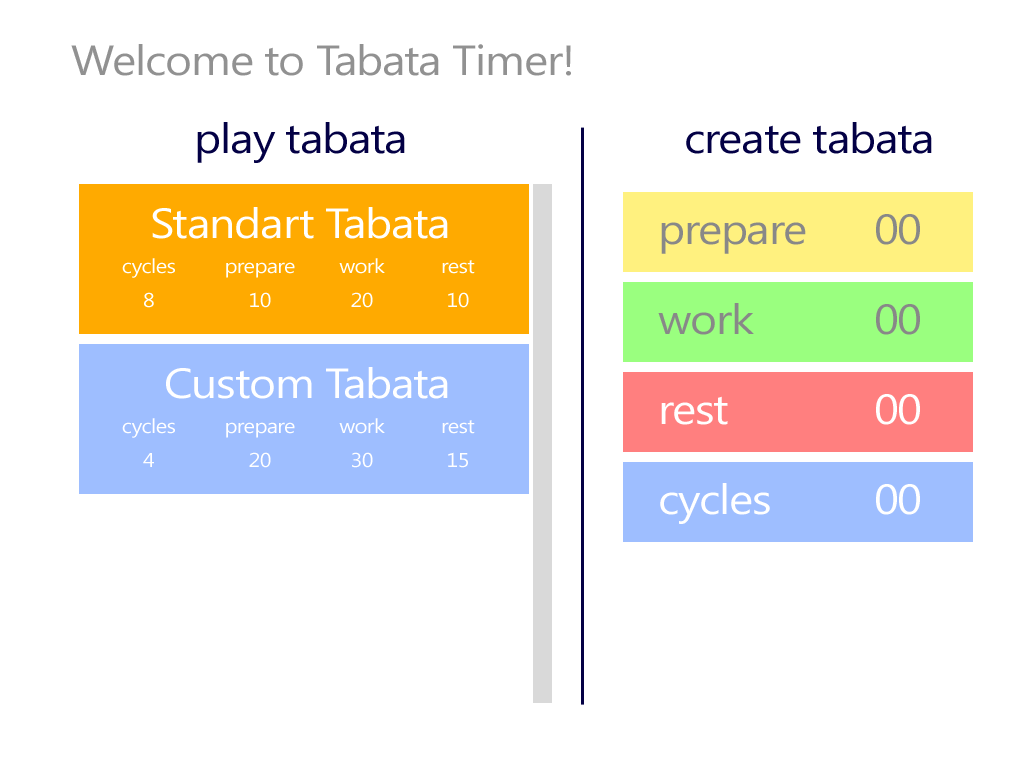
<style>
.page{position:relative;width:1024px;height:768px;background:#ffffff}
.page>*{position:absolute;margin:0}
.t1{font:42px "SegoeUI";letter-spacing:-0.025em;color:#919191;scale:1.1 1}
.t2{font:42px "SegoeUI";letter-spacing:-0.025em;color:#030045;scale:1.1 1}
.t3{font:42px "SegoeUI";letter-spacing:-0.025em;color:#ffffff;scale:1.1 1}
.t4{font:42px "SegoeUI";letter-spacing:-0.025em;color:#888888;scale:1.1 1}
.t5{font:20px "SegoeUI";letter-spacing:-0.025em;color:#ffffff;scale:1.1 1}
</style>
<div class="page">
<p class="t1" style="left:71px;top:44px;width:500px;height:32px">Welcome to Tabata Timer!</p>
<p class="t2" style="left:197px;top:122px;width:208px;height:41px">play tabata</p>
<p class="t2" style="left:686px;top:122px;width:246px;height:32px">create tabata</p>
<p class="t3" style="left:152px;top:207px;width:296px;height:32px">Standart Tabata</p>
<p class="t4" style="left:661px;top:214px;width:259px;height:40px">prepare   00</p>
<p class="t5" style="left:122px;top:258px;width:53px;height:50px;text-align:center">cycles<br>8</p>
<p class="t5" style="left:226px;top:262px;width:69px;height:46px;text-align:center">prepare<br>10</p>
<p class="t5" style="left:339px;top:258px;width:46px;height:50px;text-align:center">work<br>20</p>
<p class="t5" style="left:442px;top:260px;width:33px;height:48px;text-align:center">rest<br>10</p>
<p class="t4" style="left:658px;top:303px;width:262px;height:32px">work     00</p>
<p class="t3" style="left:166px;top:367px;width:282px;height:32px">Custom Tabata</p>
<p class="t3" style="left:661px;top:394px;width:259px;height:31px">rest      00</p>
<p class="t5" style="left:122px;top:418px;width:53px;height:49px;text-align:center">cycles<br>4</p>
<p class="t5" style="left:226px;top:422px;width:69px;height:46px;text-align:center">prepare<br>20</p>
<p class="t5" style="left:339px;top:418px;width:46px;height:50px;text-align:center">work<br>30</p>
<p class="t5" style="left:442px;top:420px;width:33px;height:48px;text-align:center">rest<br>15</p>
<p class="t3" style="left:660px;top:483px;width:260px;height:41px">cycles    00</p>
</div>
